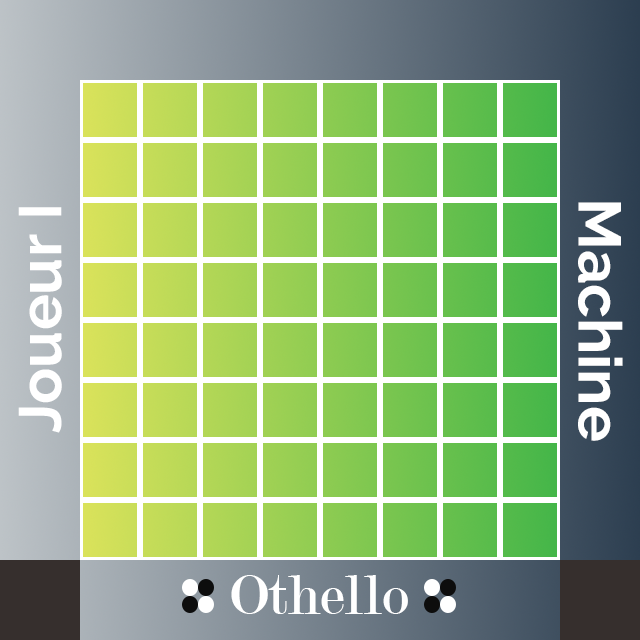
<style>
.page{position:relative;width:640px;height:640px}
.page>*{position:absolute;margin:0}
.t1{font:60px "Raleway-Bold";color:#ffffff}
.t2{font:60px "Modern-Regular";color:#ffffff}
</style>
<div class="page">
<p class="t1" style="left:18px;top:207px;width:44px;height:226px;rotate:-90deg">Joueur I</p>
<p class="t1" style="left:578px;top:202px;width:45px;height:239px;rotate:90deg">Machine</p>
<p class="t2" style="left:231px;top:575px;width:177px;height:39px">Othello</p>
</div>
